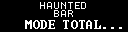
<style>
.page{position:relative;width:128px;height:32px;background:#000000}
.page>*{position:absolute;margin:0}
.t1{font:10px/8px "Terminal";letter-spacing:-0.05em;color:#ffffff}
.t2{font:12px "Terminal";letter-spacing:0.025em;color:#ffffff}
</style>
<div class="page">
<p class="t1" style="left:40px;top:2px;width:46px;height:15px;text-align:center">HAUNTED<br>BAR</p>
<p class="t2" style="left:25px;top:20px;width:97px;height:9px">MODE TOTAL...</p>
</div>
